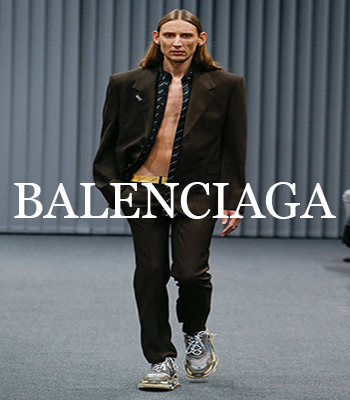
<style>
.page{position:relative;width:350px;height:400px}
.page>*{position:absolute;margin:0}
.t1{font:50px "Georgia";color:#fffefe}
</style>
<div class="page">
<p class="t1" style="left:14px;top:182px;width:322px;height:37px">BALENCIAGA</p>
</div>
